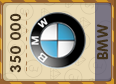
<style>
.page{position:relative;width:116px;height:84px;background:#eadab4}
.page>*{position:absolute;margin:0}
.t1{font:15px "RotondaC-Bold";letter-spacing:0.04em;color:#43341d;text-transform:uppercase}
</style>
<div class="page">
<p class="t1" style="left:10px;top:13px;width:11px;height:60px;rotate:-90deg">350 000</p>
<p class="t1" style="left:97px;top:24px;width:11px;height:36px;rotate:-90deg">bmw</p>
</div>
